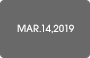
<style>
.page{position:relative;width:90px;height:58px;background:#696969}
.page>*{position:absolute;margin:0}
.t1{font:11px "TodayAG";color:#ffffff}
</style>
<div class="page">
<p class="t1" style="left:17px;top:24px;width:57px;height:10px">MAR.14,2019</p>
</div>
